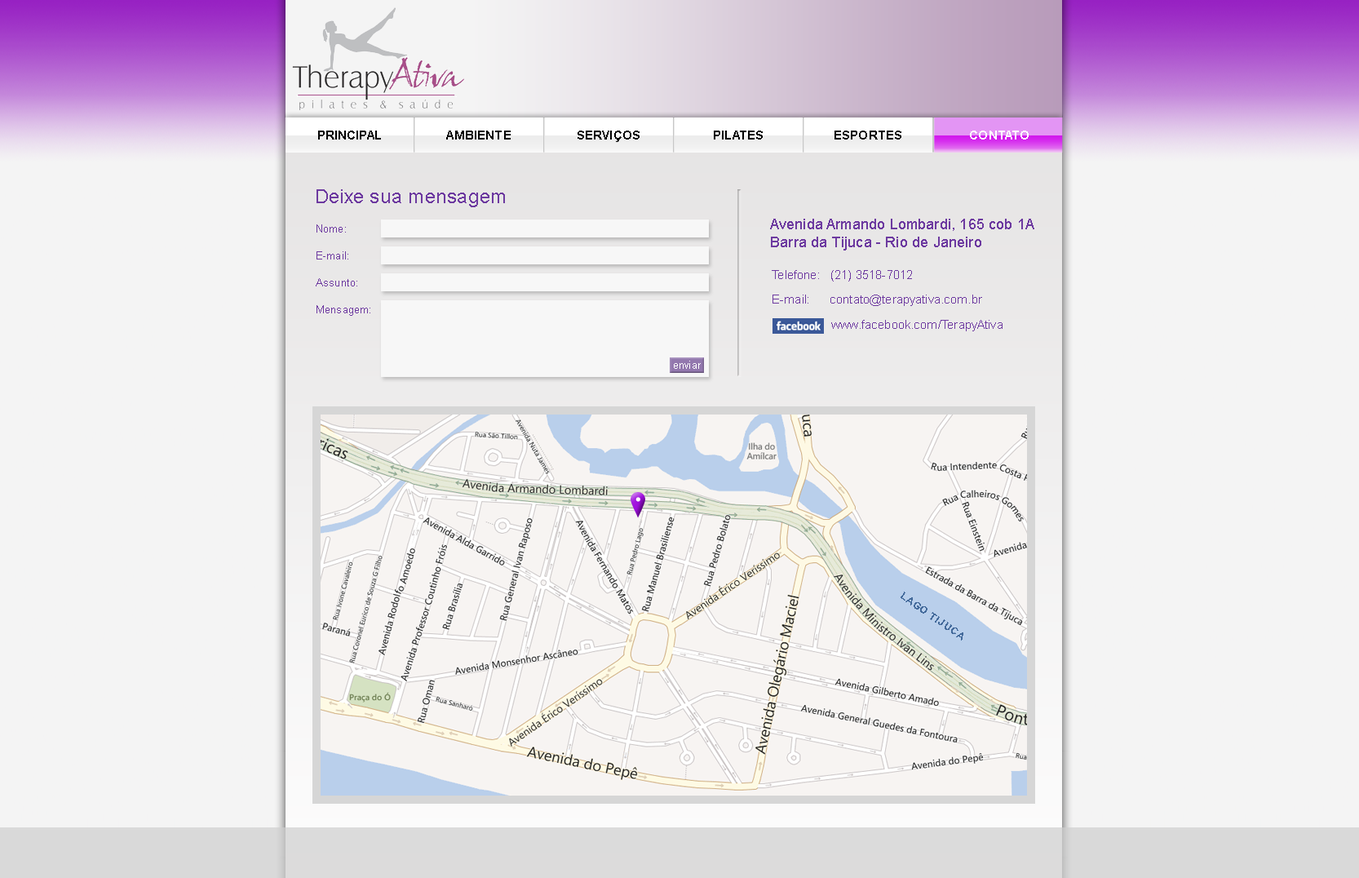
<style>
.page{position:relative;width:1359px;height:878px;background:#f4f4f4}
.page>*{position:absolute;margin:0}
.t1{font:19.6px "ArialMT";letter-spacing:0.01em;color:#6d3aa0}
.t2{font:14.7px "ArialMT";letter-spacing:0.01em;color:#6d3aa0}
.t3{font:10.6px "ArialMT";letter-spacing:0.01em;color:#6d3aa0}
.t4{font:12.2px "ArialMT";letter-spacing:0.01em;color:#6d3aa0}
.t5{font:10.6px "ArialMT";letter-spacing:0.01em;color:#ffffff}
</style>
<div class="page">
<p class="t1" style="left:316px;top:189px;width:189px;height:18px">Deixe sua mensagem</p>
<p class="t2" style="left:770px;top:219px;width:264px;height:31px">Avenida Armando Lombardi, 165 cob 1A<br>Barra da Tijuca - Rio de Janeiro</p>
<p class="t3" style="left:316px;top:224px;width:30px;height:8px">Nome:</p>
<p class="t3" style="left:316px;top:251px;width:32px;height:8px">E-mail:</p>
<p class="t4" style="left:772px;top:270px;width:47px;height:9px">Telefone:</p>
<p class="t4" style="left:831px;top:270px;width:81px;height:11px">(21) 3518-7012</p>
<p class="t3" style="left:316px;top:278px;width:41px;height:8px">Assunto:</p>
<p class="t3" style="left:316px;top:305px;width:54px;height:11px">Mensagem:</p>
<p class="t4" style="left:772px;top:294px;width:36px;height:9px">E-mail:</p>
<p class="t4" style="left:830px;top:294px;width:152px;height:12px">contato@terapyativa.com.br</p>
<p class="t4" style="left:831px;top:320px;width:171px;height:11px">www.facebook.com/TerapyAtiva</p>
<p class="t5" style="left:674px;top:360px;width:27px;height:9px">enviar</p>
</div>
